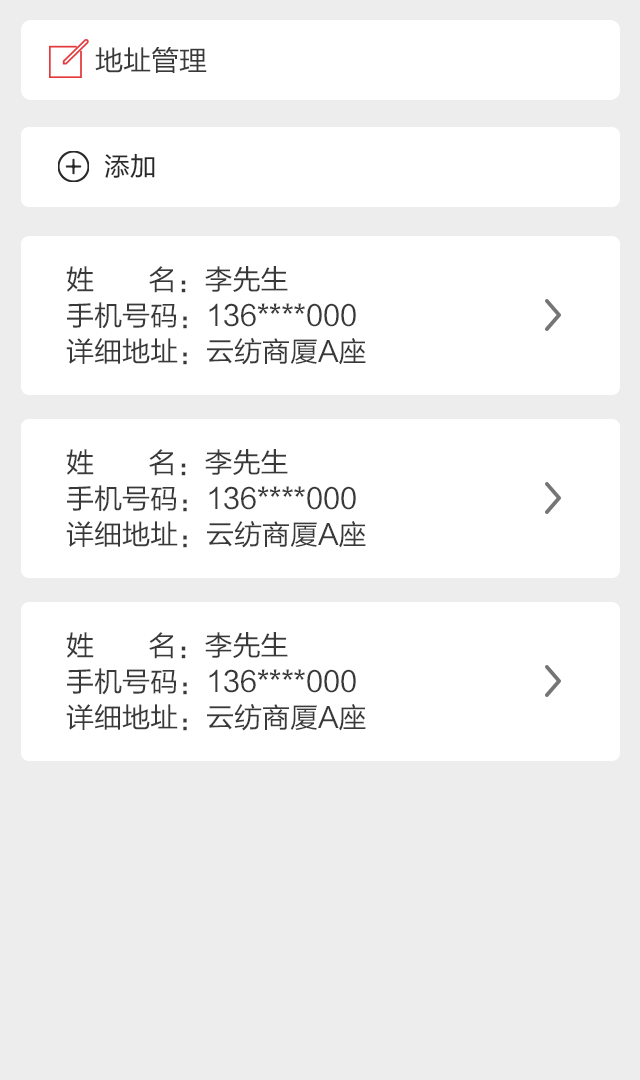
<style>
.page{position:relative;width:640px;height:1080px;background:#ffffff}
.page>*{position:absolute;margin:0}
.t1{font:28px "FZLTHJW--GB1-0";color:#393939}
.t2{font:26px "FZLTHJW--GB1-0";color:#292929}
.t3{font:28px/36px "FZLTHJW--GB1-0";color:#393939}
</style>
<div class="page">
<p class="t1" style="left:95px;top:47px;width:112px;height:26px">地址管理</p>
<p class="t2" style="left:104px;top:153px;width:51px;height:25px">添加</p>
<p class="t3" style="left:66px;top:266px;width:300px;height:99px">姓       名：李先生 <br>手机号码：136****000<br>详细地址：云纺商厦A座</p>
<p class="t3" style="left:66px;top:449px;width:300px;height:99px">姓       名：李先生 <br>手机号码：136****000<br>详细地址：云纺商厦A座</p>
<p class="t3" style="left:66px;top:632px;width:300px;height:99px">姓       名：李先生 <br>手机号码：136****000<br>详细地址：云纺商厦A座</p>
</div>
